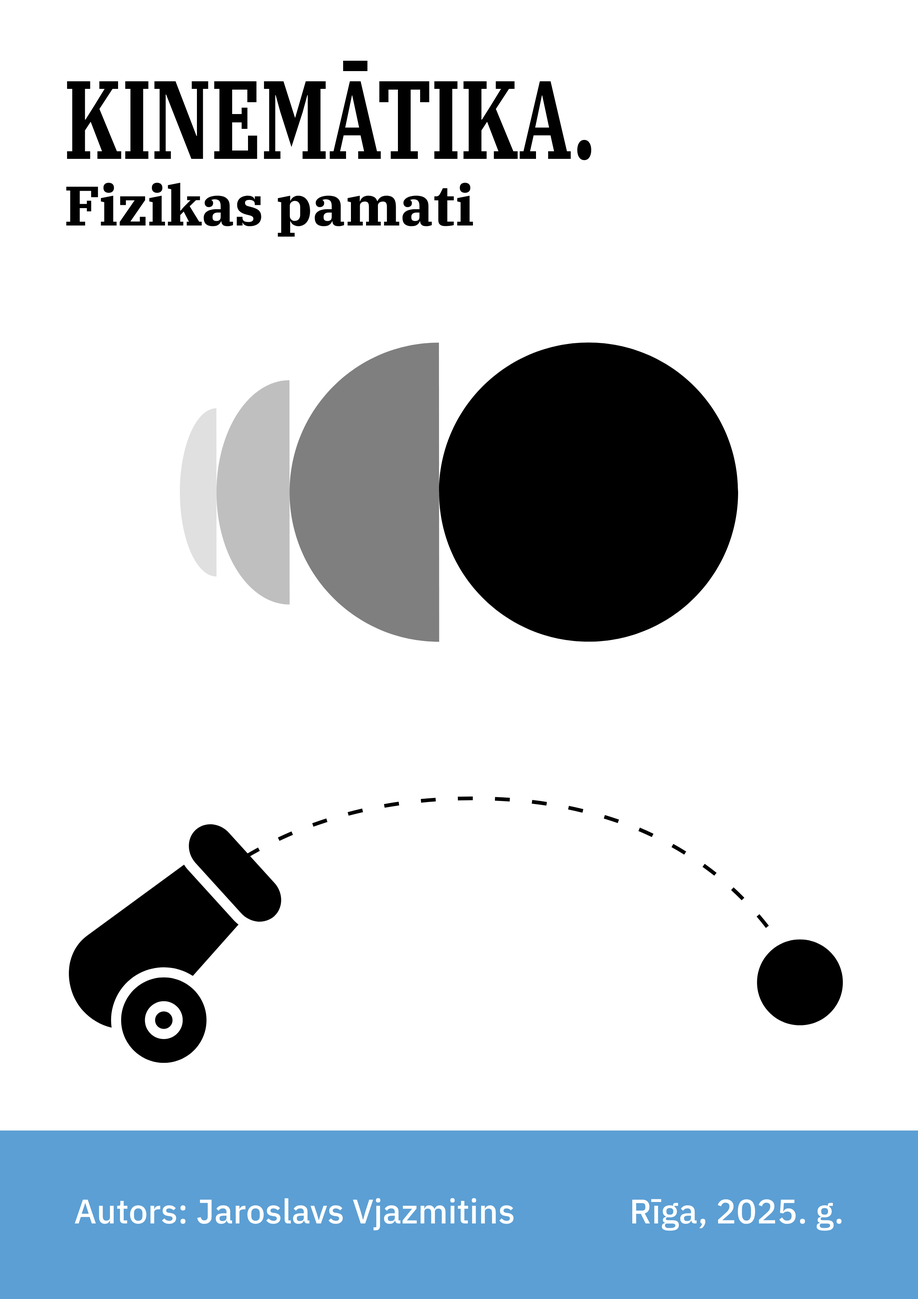
<style>
.page{position:relative;width:918px;height:1299px;background:#ffffff}
.page>*{position:absolute;margin:0}
.t1{font:55.5px "IBMPlexSerif-Bold";color:#000000}
.t2{font:111.1px "IBMPlexSerif-Bold";color:#000000;scale:0.67 1}
.t3{font:34.1px "IBMPlexSans-Medium";color:#ffffff}
</style>
<div class="page">
<p class="t1" style="left:66px;top:61px;width:526px;height:176px"><span class="t2">KINEMĀTIKA.<br></span>Fizikas pamati</p>
<p class="t3" style="left:75px;top:1198px;width:767px;height:33px">Autors: Jaroslavs Vjazmitins<br>Rīga, 2025. g.</p>
</div>
